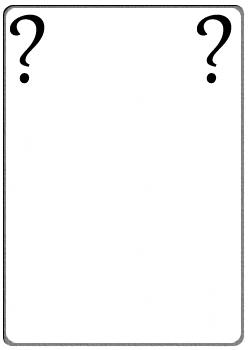
<style>
.page{position:relative;width:250px;height:350px;background:#ffffff}
.page>*{position:absolute;margin:0}
.t1{font:116.7px "Gabriola";color:#000000}
</style>
<div class="page">
<p class="t1" style="left:10px;top:14px;width:35px;height:70px">?</p>
<p class="t1" style="left:197px;top:14px;width:35px;height:70px">?</p>
</div>
